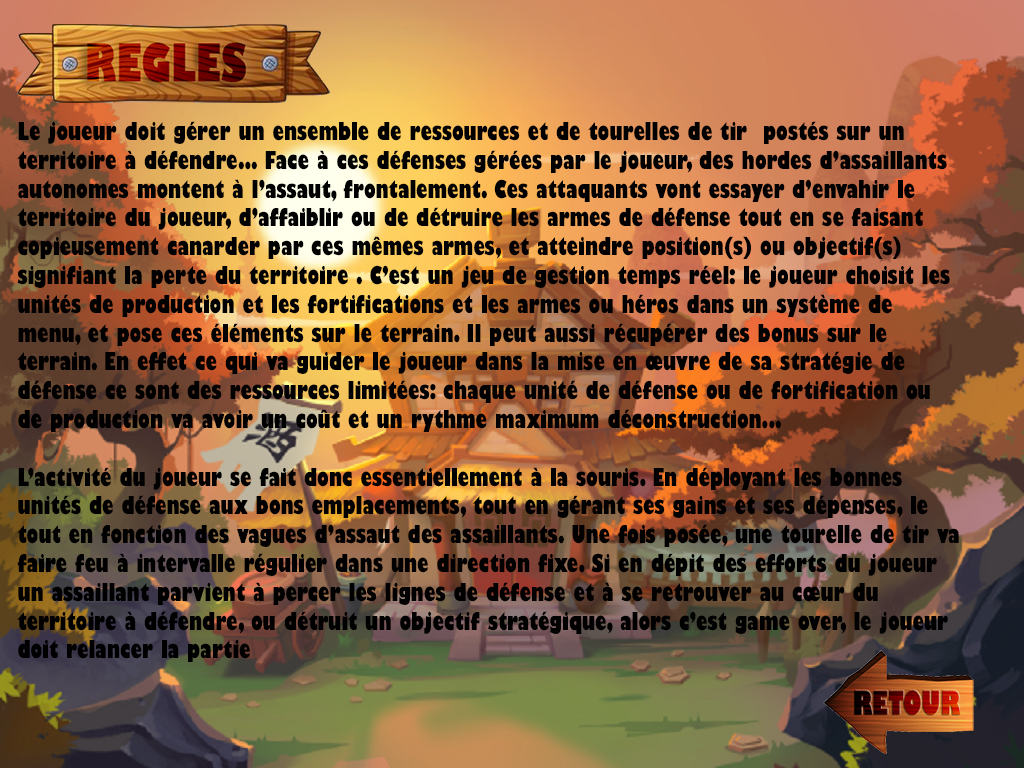
<style>
.page{position:relative;width:1024px;height:768px}
.page>*{position:absolute;margin:0}
.t1{font:24px "GillSans-UltraBoldCondensed";color:#000000}
</style>
<div class="page">
<p class="t1" style="left:17px;top:121px;width:942px;height:541px">Le joueur doit gérer un ensemble de ressources et de tourelles de tir  postés sur un territoire à défendre... Face à ces défenses gérées par le joueur, des hordes d’assaillants autonomes montent à l’assaut, frontalement. Ces attaquants vont essayer d’envahir le territoire du joueur, d’affaiblir ou de détruire les armes de défense tout en se faisant copieusement canarder par ces mêmes armes, et atteindre position(s) ou objectif(s) signifiant la perte du territoire . C’est un jeu de gestion temps réel: le joueur choisit les unités de production et les fortifications et les armes ou héros dans un système de menu, et pose ces éléments sur le terrain. Il peut aussi récupérer des bonus sur le terrain. En effet ce qui va guider le joueur dans la mise en œuvre de sa stratégie de défense ce sont des ressources limitées: chaque unité de défense ou de fortification ou de production va avoir un coût et un rythme maximum déconstruction...<br><br>L’activité du joueur se fait donc essentiellement à la souris. En déployant les bonnes unités de défense aux bons emplacements, tout en gérant ses gains et ses dépenses, le tout en fonction des vagues d’assaut des assaillants. Une fois posée, une tourelle de tir va faire feu à intervalle régulier dans une direction fixe. Si en dépit des efforts du joueur un assaillant parvient à percer les lignes de défense et à se retrouver au cœur du territoire à défendre, ou détruit un objectif stratégique, alors c’est game over, le joueur doit relancer la partie</p>
</div>
